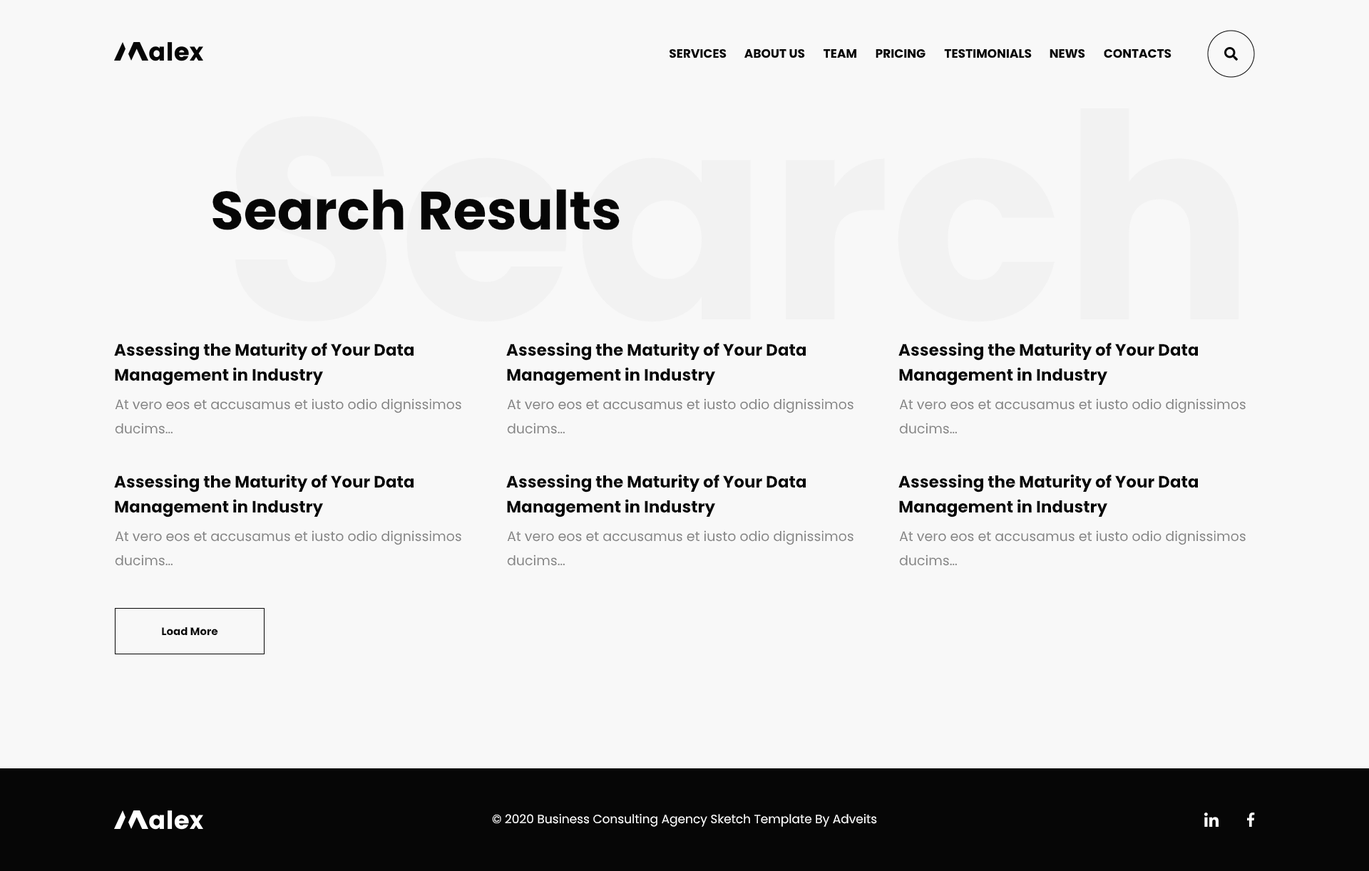
<style>
.page{position:relative;width:1369px;height:871px;background:#f8f8f8}
.page>*{position:absolute;margin:0}
.t1{font:12.1px "Poppins-Bold";color:#060606}
.t2{font:54.2px "Poppins-Bold";color:#060606}
.t3{font:16.4px/25px "Poppins-Bold";color:#060606}
.t4{font:13.5px/24.2px "Poppins-Regular";color:#828282}
.t5{font:10.7px "Poppins-Bold";color:#060606}
.t6{font:12.1px "Poppins-Regular";color:#ffffff}
</style>
<div class="page">
<p class="t1" style="left:669px;top:48px;width:57px;height:10px">SERVICES</p>
<p class="t1" style="left:744px;top:49px;width:61px;height:9px">ABOUT US</p>
<p class="t1" style="left:823px;top:49px;width:33px;height:9px">TEAM</p>
<p class="t1" style="left:875px;top:49px;width:50px;height:9px">PRICING</p>
<p class="t1" style="left:944px;top:49px;width:88px;height:9px">TESTIMONIALS</p>
<p class="t1" style="left:1049px;top:49px;width:36px;height:9px">NEWS</p>
<p class="t1" style="left:1104px;top:49px;width:67px;height:9px">CONTACTS</p>
<p class="t2" style="left:212px;top:189px;width:408px;height:41px">Search Results</p>
<p class="t3" style="left:114px;top:342px;width:300px;height:44px">Assessing the Maturity of Your Data Management in Industry</p>
<p class="t3" style="left:506px;top:342px;width:300px;height:44px">Assessing the Maturity of Your Data Management in Industry</p>
<p class="t3" style="left:898px;top:342px;width:300px;height:44px">Assessing the Maturity of Your Data Management in Industry</p>
<p class="t4" style="left:115px;top:399px;width:346px;height:35px">At vero eos et accusamus et iusto odio dignissimos ducims…</p>
<p class="t4" style="left:507px;top:399px;width:346px;height:35px">At vero eos et accusamus et iusto odio dignissimos ducims…</p>
<p class="t4" style="left:899px;top:399px;width:346px;height:35px">At vero eos et accusamus et iusto odio dignissimos ducims…</p>
<p class="t3" style="left:114px;top:474px;width:300px;height:44px">Assessing the Maturity of Your Data Management in Industry</p>
<p class="t3" style="left:506px;top:474px;width:300px;height:44px">Assessing the Maturity of Your Data Management in Industry</p>
<p class="t3" style="left:898px;top:474px;width:300px;height:44px">Assessing the Maturity of Your Data Management in Industry</p>
<p class="t4" style="left:115px;top:530px;width:346px;height:36px">At vero eos et accusamus et iusto odio dignissimos ducims…</p>
<p class="t4" style="left:507px;top:530px;width:346px;height:36px">At vero eos et accusamus et iusto odio dignissimos ducims…</p>
<p class="t4" style="left:899px;top:530px;width:346px;height:36px">At vero eos et accusamus et iusto odio dignissimos ducims…</p>
<p class="t5" style="left:162px;top:627px;width:56px;height:9px">Load More</p>
<p class="t6" style="left:492px;top:814px;width:385px;height:13px">© 2020 Business Consulting Agency Sketch Template By Adveits</p>
</div>
